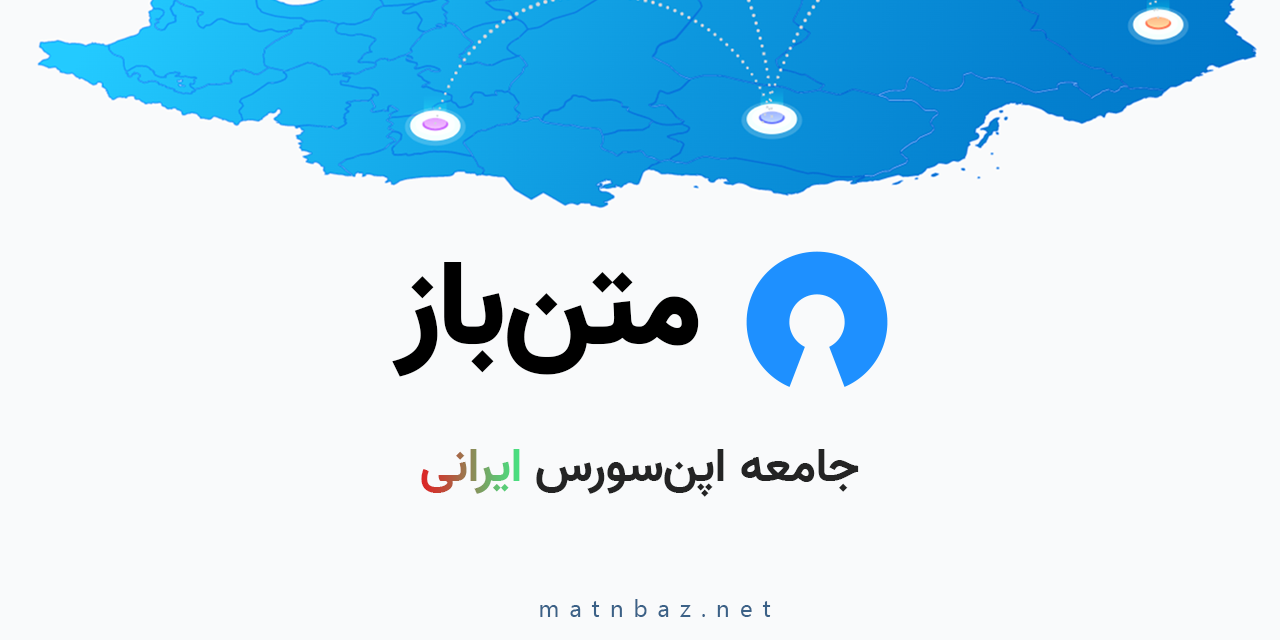
<style>
.page{position:relative;width:1280px;height:640px;background:#f9fafb}
.page>*{position:absolute;margin:0}
.t1{font:120px "Vazir-Black";color:#000000}
.t2{font:48px "Vazir-Bold";letter-spacing:0.005em;color:#242424}
.t3{font:48px "Vazir-Bold";letter-spacing:0.005em;color:#f9fafb}
.t4{font:48px "Vazir-Bold";letter-spacing:0.005em}
.t5{font:24px "SegoeUI";letter-spacing:0.42em;color:#3b6187}
</style>
<div class="page">
<p class="t1" style="left:392px;top:262px;width:307px;height:115px">متن‌باز</p>
<p class="t2" style="left:421px;top:449px;width:438px;height:48px">جامعه اپن‌سورس <span class="t3">ایرانی</span></p>
<p class="t4" style="left:421px;top:449px;width:99px;height:45px">ایرانی</p>
<p class="t5" style="left:540px;top:599px;width:231px;height:18px">matnbaz.net</p>
</div>
